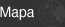
<style>
.page{position:relative;width:65px;height:27px;background:#333333}
.page>*{position:absolute;margin:0}
.t1{font:14px "Helvetica";color:#ffffff}
</style>
<div class="page">
<p class="t1" style="left:0px;top:6px;width:34px;height:14px">Mapa</p>
</div>
